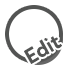
<style>
.page{position:relative;width:68px;height:68px;background:#ffffff}
.page>*{position:absolute;margin:0}
.t1{font:20.8px "MikadoMedium";color:#535453}
</style>
<div class="page">
<p class="t1" style="left:24px;top:36px;width:38px;height:28px;rotate:-30deg">Edit</p>
</div>
